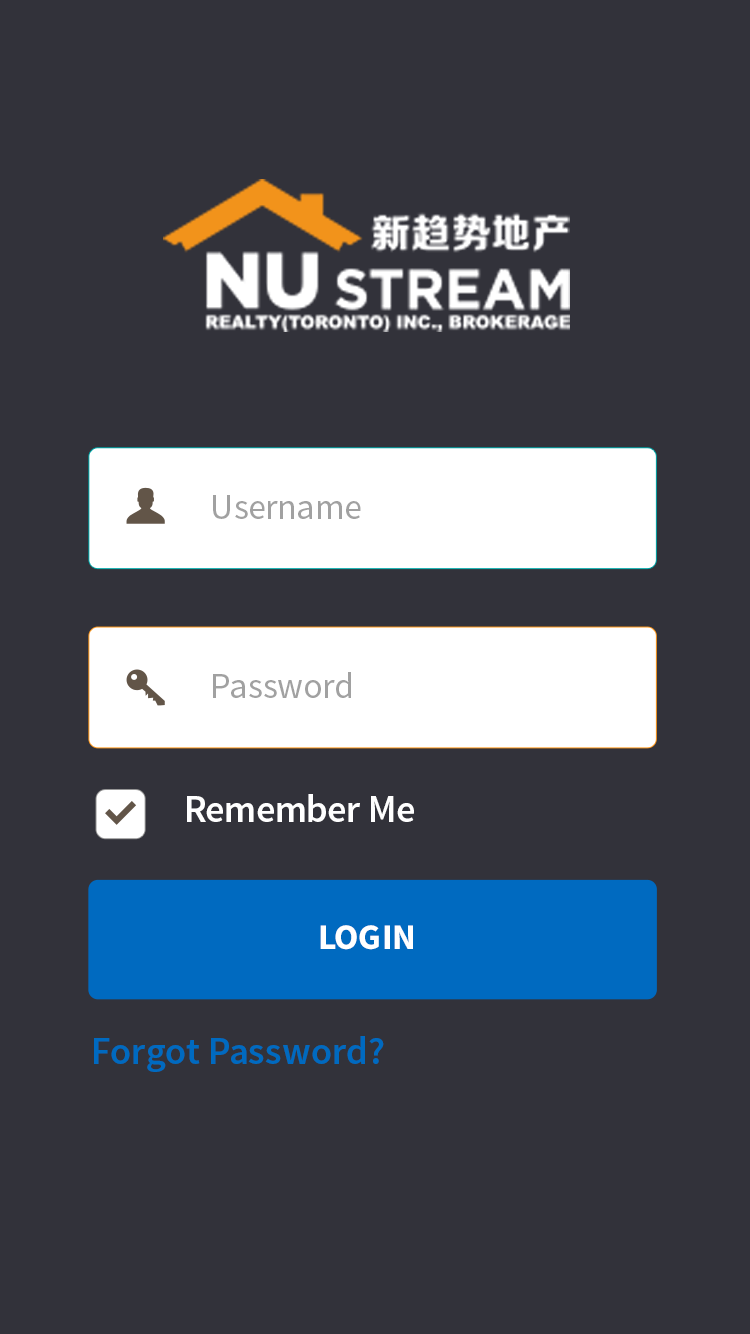
<style>
.page{position:relative;width:750px;height:1334px;background:#32323a}
.page>*{position:absolute;margin:0}
.t1{font:35.9px "SourceSansPro-Regular";color:#a1a1a1}
.t2{font:38.2px "SourceSansPro-Semibold";color:#ffffff}
.t3{font:35.9px "SourceSansPro-Bold";color:#ffffff;text-transform:uppercase}
.t4{font:38.2px "SourceSansPro-Semibold";color:#006ac0}
</style>
<div class="page">
<p class="t1" style="left:213px;top:495px;width:148px;height:24px">Username</p>
<p class="t1" style="left:213px;top:672px;width:138px;height:26px">Password</p>
<p class="t2" style="left:187px;top:794px;width:227px;height:28px">Remember Me</p>
<p class="t3" style="left:320px;top:925px;width:93px;height:25px">Login</p>
<p class="t4" style="left:94px;top:1036px;width:290px;height:36px">Forgot Password?</p>
</div>
